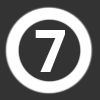
<style>
.page{position:relative;width:100px;height:100px;background:#333333}
.page>*{position:absolute;margin:0}
.t1{font:60px "SegoeUI-Bold";letter-spacing:-0.105em;color:#ffffff}
</style>
<div class="page">
<p class="t1" style="left:35px;top:30px;width:30px;height:42px">7</p>
</div>
